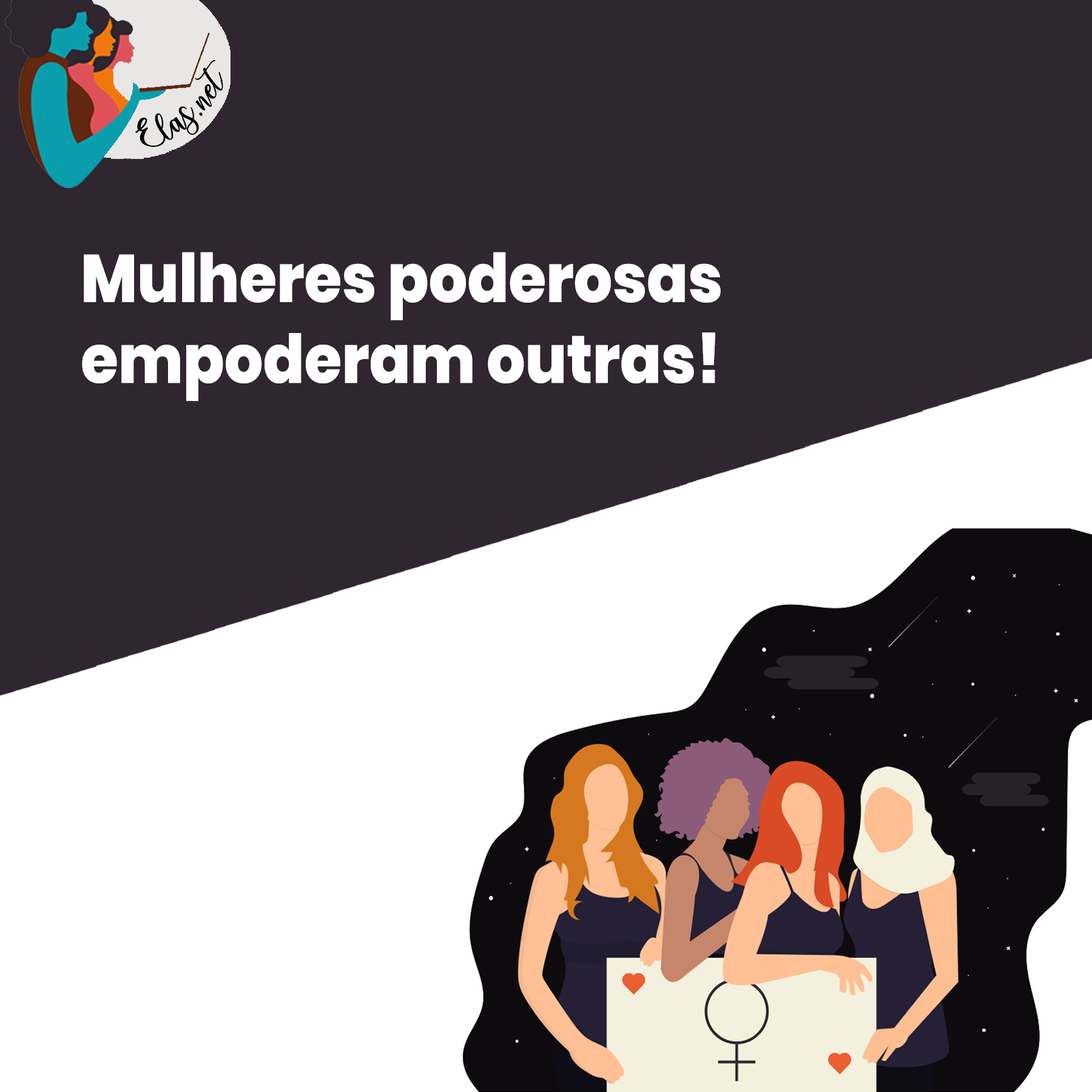
<style>
.page{position:relative;width:1092px;height:1092px;background:#2f262f}
.page>*{position:absolute;margin:0}
.t1{font:25px "charlinda-Regular";color:#000000;scale:1.18 1}
.t2{font:67.3px "Poppins-ExtraBold";color:#ffffff;scale:0.9 1}
</style>
<div class="page">
<p class="t1" style="left:135px;top:60px;width:88px;height:87px;rotate:-42deg">Elas.net</p>
<p class="t2" style="left:82px;top:252px;width:639px;height:149px">Mulheres poderosas empoderam outras!</p>
</div>
